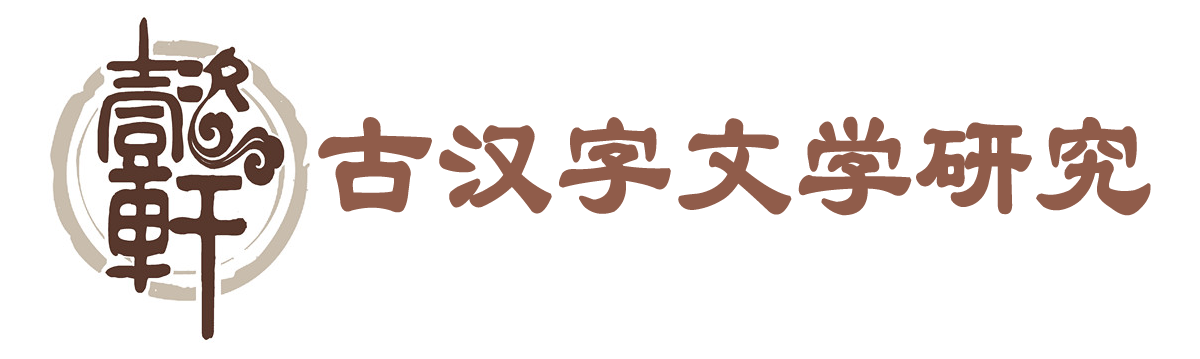
<style>
.page{position:relative;width:1200px;height:359px;background:#ffffff}
.page>*{position:absolute;margin:0}
.t1{font:148.3px "LiSu";color:#905c4a;font-weight:bold;scale:0.79 1}
</style>
<div class="page">
<p class="t1" style="left:318px;top:116px;width:833px;height:100px">古汉字文学研究</p>
</div>
